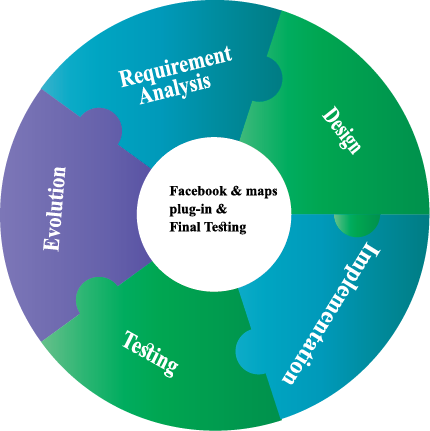
<style>
.page{position:relative;width:430px;height:431px;background:#ffffff}
.page>*{position:absolute;margin:0}
.t1{font:24px/21px "TimesNewRomanPS-BoldMT";color:#ffffff;scale:0.86 1}
.t2{font:24px "TimesNewRomanPS-BoldMT";color:#ffffff;scale:0.73 1}
.t3{font:22.9px "TimesNewRomanPS-BoldMT";color:#ffffff;scale:0.9 1}
.t4{font:14px/18px "TimesNewRomanPS-BoldMT";color:#000000}
.t5{font:24px "TimesNewRomanPS-BoldMT";color:#ffffff}
.t6{font:24.2px "TimesNewRomanPS-BoldMT";color:#ffffff;scale:0.85 1}
</style>
<div class="page">
<p class="t1" style="left:118px;top:45px;width:115px;height:60px;rotate:-14deg">Requirement <br>   Analysis</p>
<p class="t2" style="left:321px;top:105px;width:40px;height:50px;rotate:52deg">Design</p>
<p class="t3" style="left:43px;top:167px;width:23px;height:85px;rotate:-85deg">Evolution</p>
<p class="t4" style="left:169px;top:185px;width:109px;height:50px">Facebook &amp; maps <br>plug-in &amp;<br>Final Testing</p>
<p class="t5" style="left:281px;top:241px;width:100px;height:144px;rotate:122deg">Implementation</p>
<p class="t6" style="left:122px;top:330px;width:57px;height:48px;rotate:29deg">Testing</p>
</div>
